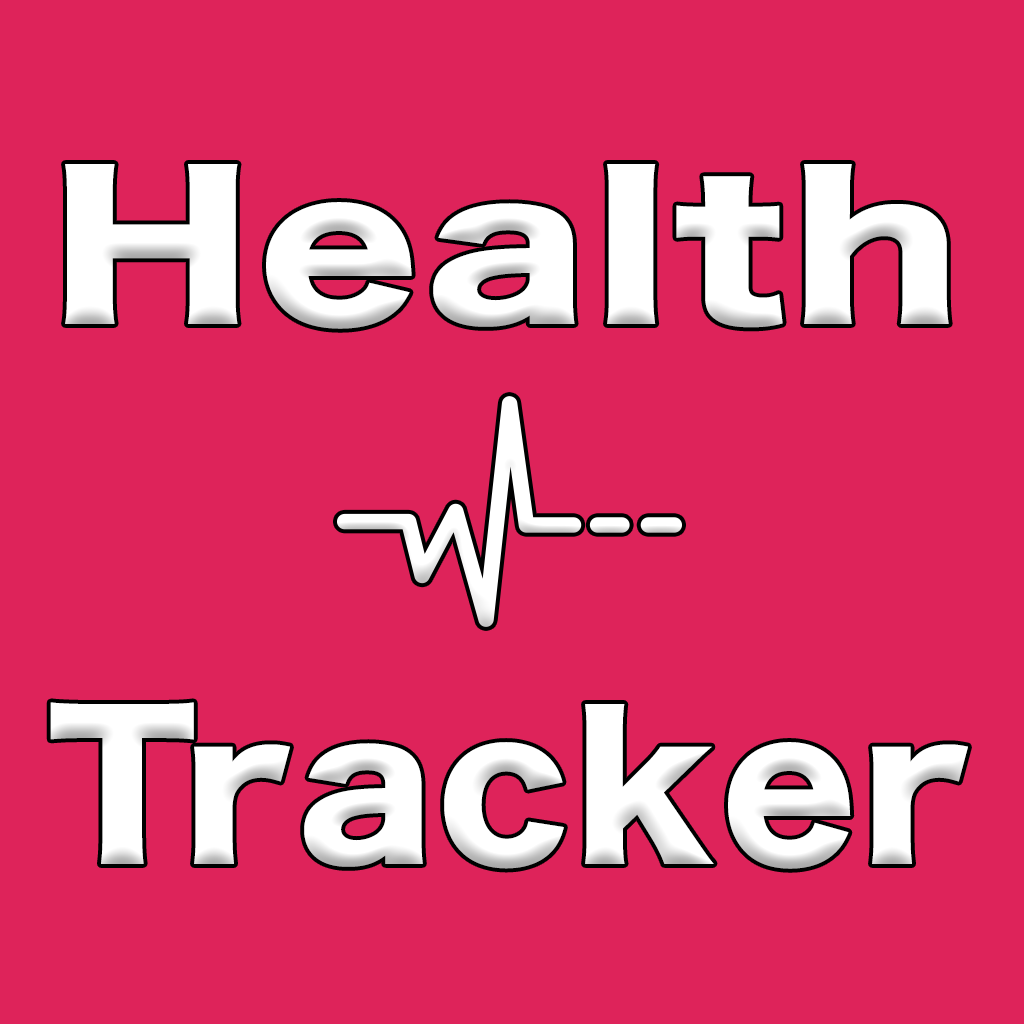
<style>
.page{position:relative;width:1024px;height:1024px;background:#de235a}
.page>*{position:absolute;margin:0}
.t1{font:192.2px "HiraKakuStdN-W8";letter-spacing:0.035em;color:#ffffff;scale:1.19 1}
.t2{font:192.2px "HiraKakuStdN-W8";letter-spacing:0.035em;color:#ffffff}
</style>
<div class="page">
<p class="t1" style="left:65px;top:164px;width:884px;height:165px">Health</p>
<p class="t2" style="left:50px;top:702px;width:918px;height:167px">Tracker</p>
</div>
